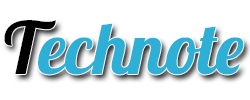
<style>
.page{position:relative;width:250px;height:100px;background:#ffffff}
.page>*{position:absolute;margin:0}
.t1{font:72px "Lobster";color:#2eafd6}
.t2{font:72px "Lobster";color:#000000}
</style>
<div class="page">
<p class="t1" style="left:4px;top:20px;width:240px;height:55px"><span class="t2">T</span>echnote</p>
</div>
